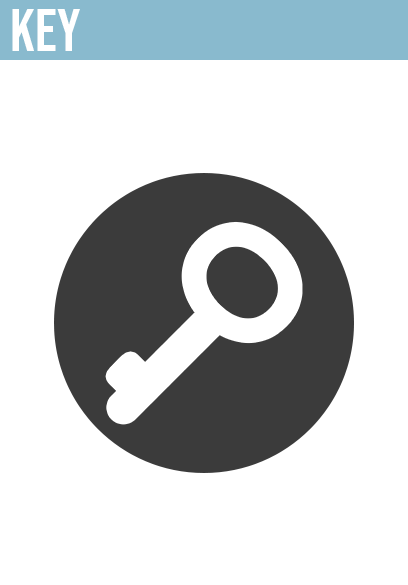
<style>
.page{position:relative;width:408px;height:585px;background:#ffffff}
.page>*{position:absolute;margin:0}
.t1{font:60px "BebasNeue-Regular";color:#ffffff}
</style>
<div class="page">
<p class="t1" style="left:12px;top:9px;width:68px;height:42px">key</p>
</div>
